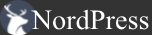
<style>
.page{position:relative;width:152px;height:35px;background:#333333}
.page>*{position:absolute;margin:0}
.t1{font:27.8px "TimesNewRomanPSMT";color:#ffffff}
</style>
<div class="page">
<p class="t1" style="left:31px;top:9px;width:118px;height:21px">NordPress</p>
</div>
